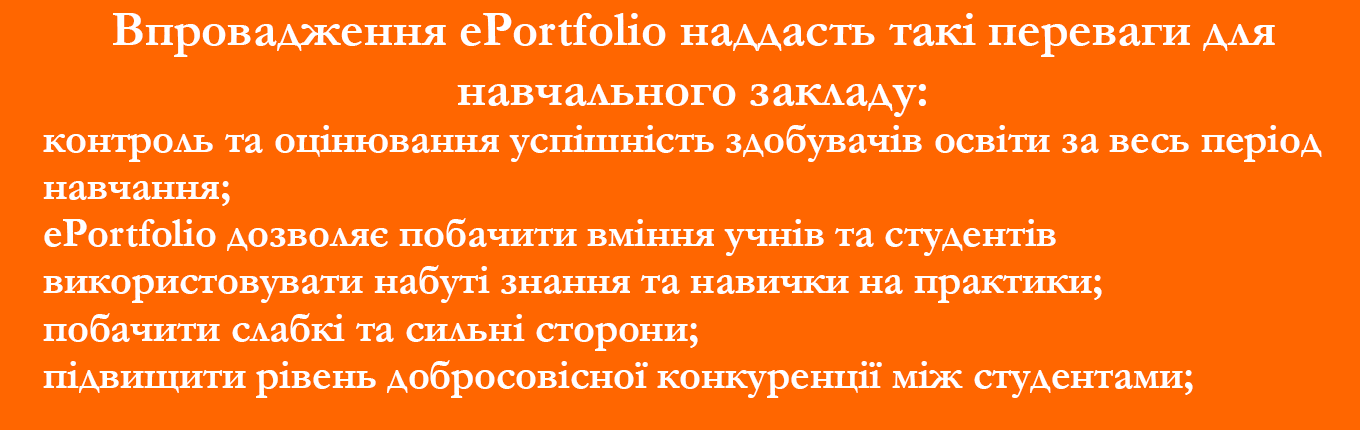
<style>
.page{position:relative;width:1360px;height:430px;background:#ff6600}
.page>*{position:absolute;margin:0}
.t1{font:41.7px/47.2px "Garamond-Bold";color:#ffffff}
.t2{font:50px "Garamond-Bold";color:#ffffff}
</style>
<div class="page">
<p class="t1" style="left:43px;top:13px;width:1279px;height:385px;text-align:center"><span class="t2">Впровадження еPortfolio наддасть такі переваги для навчального закладу:<br></span>контроль та оцінювання успішність здобувачів освіти за весь період навчання;<br>еPortfolio дозволяє побачити вміння учнів та студентів використовувати набуті знання та навички на практики;<br>побачити слабкі та сильні сторони;<br>підвищити рівень добросовісної конкуренції між студентами;</p>
</div>
